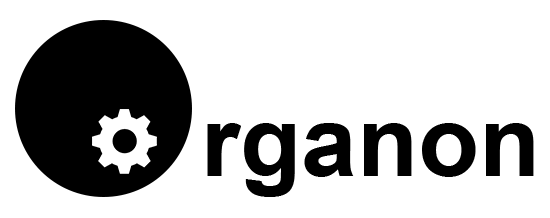
<style>
.page{position:relative;width:550px;height:218px;background:#ffffff}
.page>*{position:absolute;margin:0}
.t1{font:100px "Arial-BoldMT";color:#000000}
</style>
<div class="page">
<p class="t1" style="left:207px;top:123px;width:327px;height:74px">rganon</p>
</div>
